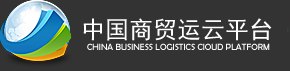
<style>
.page{position:relative;width:290px;height:71px;background:#333333}
.page>*{position:absolute;margin:0}
.t1{font:24px "SimHei";color:#ffffff}
.t2{font:9px "BerlinSansFB-Reg";color:#ffffff}
</style>
<div class="page">
<p class="t1" style="left:83px;top:18px;width:189px;height:23px">中国商贸运云平台</p>
<p class="t2" style="left:87px;top:43px;width:183px;height:7px">CHINA BUSINESS LOGISTICS ClOUD PLATFORM</p>
</div>
